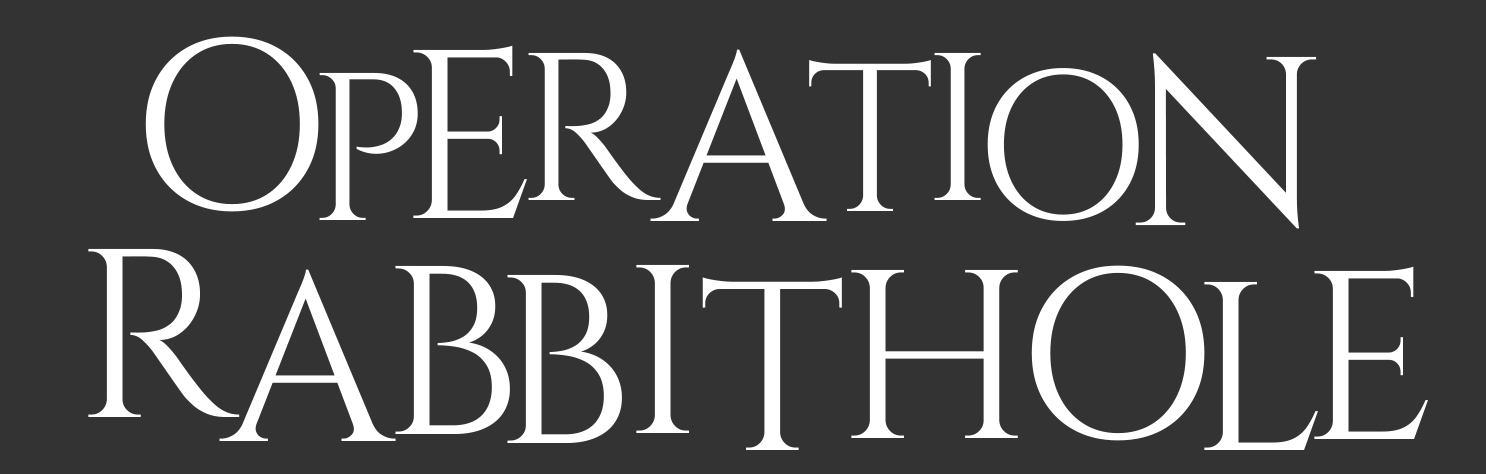
<style>
.page{position:relative;width:1486px;height:474px;background:#333333}
.page>*{position:absolute;margin:0}
.t1{font:240px "Cinzel-Regular";color:#ffffff}
.t2{font:210px "Cinzel-Regular";color:#ffffff}
</style>
<div class="page">
<p class="t1" style="left:145px;top:36px;width:174px;height:176px">O</p>
<p class="t1" style="left:413px;top:45px;width:114px;height:173px">E</p>
<p class="t2" style="left:528px;top:52px;width:133px;height:148px">R</p>
<p class="t1" style="left:650px;top:49px;width:177px;height:172px">A</p>
<p class="t2" style="left:934px;top:52px;width:47px;height:148px">I</p>
<p class="t1" style="left:1135px;top:53px;width:182px;height:176px">N</p>
<p class="t2" style="left:809px;top:60px;width:122px;height:151px">T</p>
<p class="t2" style="left:319px;top:72px;width:99px;height:148px">P</p>
<p class="t2" style="left:987px;top:68px;width:152px;height:153px">O</p>
<p class="t1" style="left:88px;top:248px;width:152px;height:169px">R</p>
<p class="t1" style="left:219px;top:269px;width:177px;height:172px">A</p>
<p class="t1" style="left:395px;top:265px;width:115px;height:169px">B</p>
<p class="t1" style="left:636px;top:264px;width:53px;height:169px">I</p>
<p class="t1" style="left:851px;top:269px;width:167px;height:169px">H</p>
<p class="t1" style="left:1031px;top:265px;width:174px;height:176px">O</p>
<p class="t1" style="left:1314px;top:266px;width:114px;height:173px">E</p>
<p class="t1" style="left:507px;top:274px;width:115px;height:169px">B</p>
<p class="t1" style="left:702px;top:277px;width:140px;height:173px">T</p>
<p class="t1" style="left:1204px;top:281px;width:114px;height:169px">L</p>
</div>
